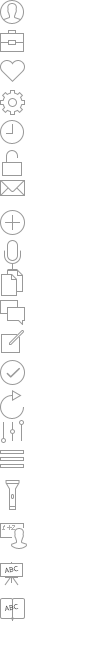
<style>
.page{position:relative;width:90px;height:655px;background:#ffffff}
.page>*{position:absolute;margin:0}
.t1{font:7px "LucidaHandwriting-Italic";letter-spacing:-0.051em;color:#afaeae}
.t2{font:7px "BandaRegular";color:#5a5a5a}
</style>
<div class="page">
<p class="t1" style="left:2px;top:525px;width:13px;height:5px">1+2</p>
<p class="t2" style="left:5px;top:566px;width:14px;height:7px;rotate:-10deg">ABC</p>
<p class="t2" style="left:5px;top:604px;width:14px;height:7px;rotate:-10deg">ABC</p>
</div>
